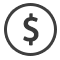
<style>
.page{position:relative;width:60px;height:60px;background:#ffffff}
.page>*{position:absolute;margin:0}
.t1{font:37.6px "MyriadPro-Regular";color:#383838;font-weight:bold}
</style>
<div class="page">
<p class="t1" style="left:23px;top:13px;width:16px;height:33px">$</p>
</div>
